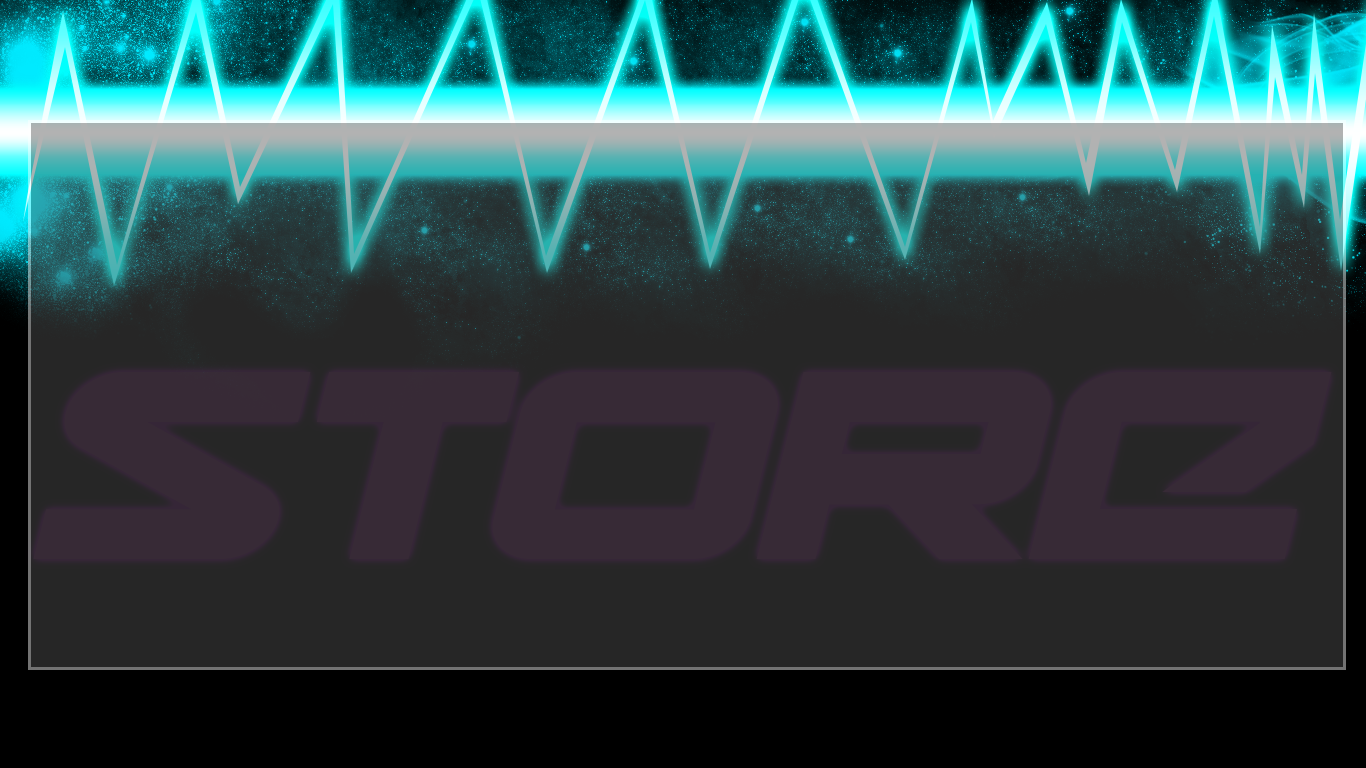
<style>
.page{position:relative;width:1366px;height:768px;background:#262626}
.page>*{position:absolute;margin:0}
.t1{font:262px "Onky-Italic";color:#372a36;scale:1.18 1}
</style>
<div class="page">
<p class="t1" style="left:33px;top:372px;width:1299px;height:187px">Store</p>
</div>
